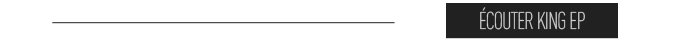
<style>
.page{position:relative;width:699px;height:41px;background:#ffffff}
.page>*{position:absolute;margin:0}
.t1{font:24px "DINOT-CondLight";letter-spacing:-0.05em;color:#cfcfcf;text-transform:uppercase}
</style>
<div class="page">
<p class="t1" style="left:480px;top:7px;width:105px;height:23px">écouter KING EP</p>
</div>
